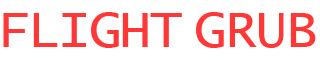
<style>
.page{position:relative;width:320px;height:60px;background:#ffffff}
.page>*{position:absolute;margin:0}
.t1{font:54.2px "LucidaConsole";letter-spacing:-0.04em;color:#ff3737}
</style>
<div class="page">
<p class="t1" style="left:3px;top:12px;width:313px;height:36px">FLIGHT GRUB</p>
</div>
